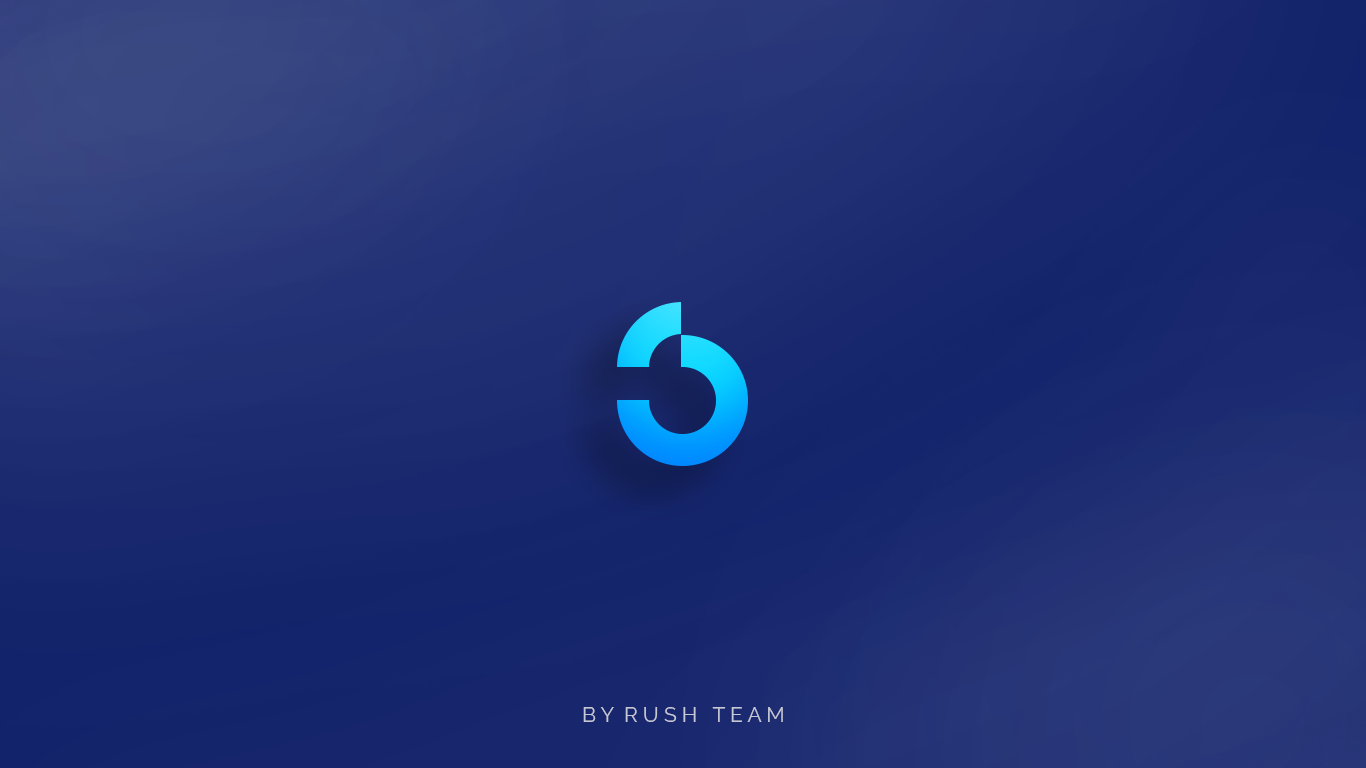
<style>
.page{position:relative;width:1366px;height:768px}
.page>*{position:absolute;margin:0}
.t1{font:20.8px "Raleway-Regular";color:#c6c7d5}
</style>
<div class="page">
<p class="t1" style="left:583px;top:707px;width:200px;height:15px">B Y  R U S H   T E A M</p>
</div>
